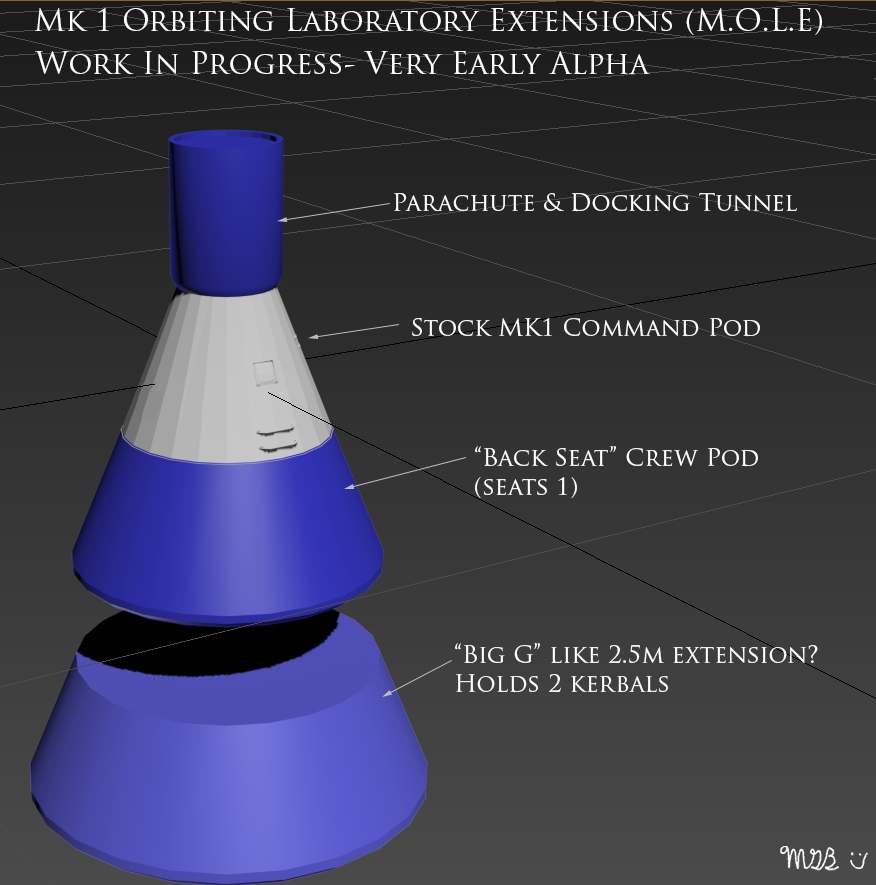
<style>
.page{position:relative;width:876px;height:885px}
.page>*{position:absolute;margin:0}
.t1{font:30px "TrajanPro-Regular";color:#ffffff}
.t2{font:24px "TrajanPro-Regular";color:#ffffff}
</style>
<div class="page">
<p class="t1" style="left:35px;top:8px;width:787px;height:27px">Mk 1 Orbiting Laboratory Extensions (M.O.L.E)</p>
<p class="t1" style="left:35px;top:51px;width:615px;height:23px">Work In Progress- Very Early Alpha</p>
<p class="t2" style="left:394px;top:192px;width:403px;height:20px">Parachute &amp; Docking Tunnel</p>
<p class="t2" style="left:412px;top:317px;width:348px;height:20px">Stock MK1 Command Pod</p>
<p class="t2" style="left:475px;top:446px;width:283px;height:52px">“Back Seat” Crew Pod<br>(seats 1)</p>
<p class="t2" style="left:455px;top:643px;width:363px;height:50px">“Big G” like 2.5m extension?<br>Holds 2 kerbals</p>
</div>
